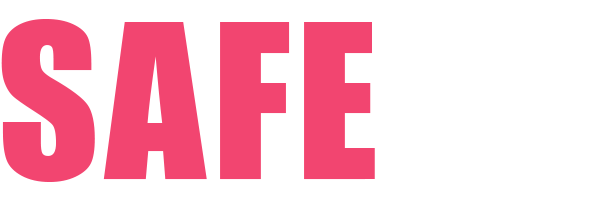
<style>
.page{position:relative;width:600px;height:200px;background:#ffffff}
.page>*{position:absolute;margin:0}
.t1{font:197.9px "Impact";letter-spacing:0.03em;color:#f24570}
.t2{font:197.9px "Impact";letter-spacing:0.03em;color:#ffffff}
</style>
<div class="page">
<p class="t1" style="left:1px;top:19px;width:598px;height:163px">SAFE<span class="t2">69</span></p>
</div>
